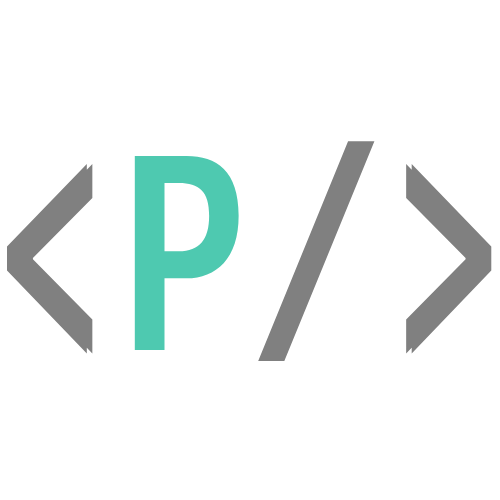
<style>
.page{position:relative;width:500px;height:500px;background:#ffffff}
.page>*{position:absolute;margin:0}
.t1{font:294px "OfficeCodePro-Medium";color:#808080;font-weight:bold;scale:0.71 1}
.t2{font:294px "OfficeCodePro-Medium";color:#4ec9b0;font-weight:bold;scale:0.71 1}
</style>
<div class="page">
<p class="t1" style="left:7px;top:141px;width:485px;height:220px">&lt;<span class="t2">P</span>/&gt;</p>
</div>
